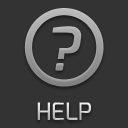
<style>
.page{position:relative;width:128px;height:128px;background:#333333}
.page>*{position:absolute;margin:0}
.t1{font:24px "Exo-Medium";text-transform:uppercase}
</style>
<div class="page">
<p class="t1" style="left:37px;top:102px;width:54px;height:18px">Help</p>
</div>
